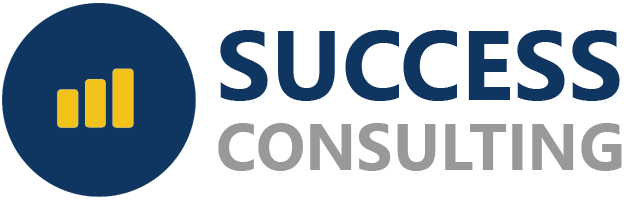
<style>
.page{position:relative;width:624px;height:200px;background:#ffffff}
.page>*{position:absolute;margin:0}
.t1{font:65px/70px "LeelawadeeUI-Bold";color:#999999;text-transform:uppercase}
.t2{font:98px/70px "LeelawadeeUI-Bold";color:#0f3661;text-transform:uppercase}
</style>
<div class="page">
<p class="t1" style="left:218px;top:30px;width:404px;height:141px"><span class="t2">Success<br></span>Consulting</p>
</div>
